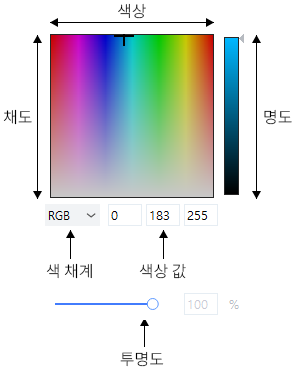
<style>
.page{position:relative;width:296px;height:378px;background:#ffffff}
.page>*{position:absolute;margin:0}
.t1{font:16px "Autoincs_TC_2020_Regular";color:#000000}
.t2{font:12px "Autoincs_TC_2020_Regular";color:#000000}
</style>
<div class="page">
<p class="t1" style="left:118px;top:3px;width:28px;height:16px">색상</p>
<p class="t1" style="left:3px;top:109px;width:29px;height:16px">채도</p>
<p class="t1" style="left:264px;top:109px;width:28px;height:16px">명도</p>
<p class="t2" style="left:46px;top:263px;width:46px;height:16px">색 채계</p>
<p class="t2" style="left:139px;top:263px;width:47px;height:16px">색상 값</p>
<p class="t2" style="left:120px;top:351px;width:44px;height:16px">투명도</p>
</div>
